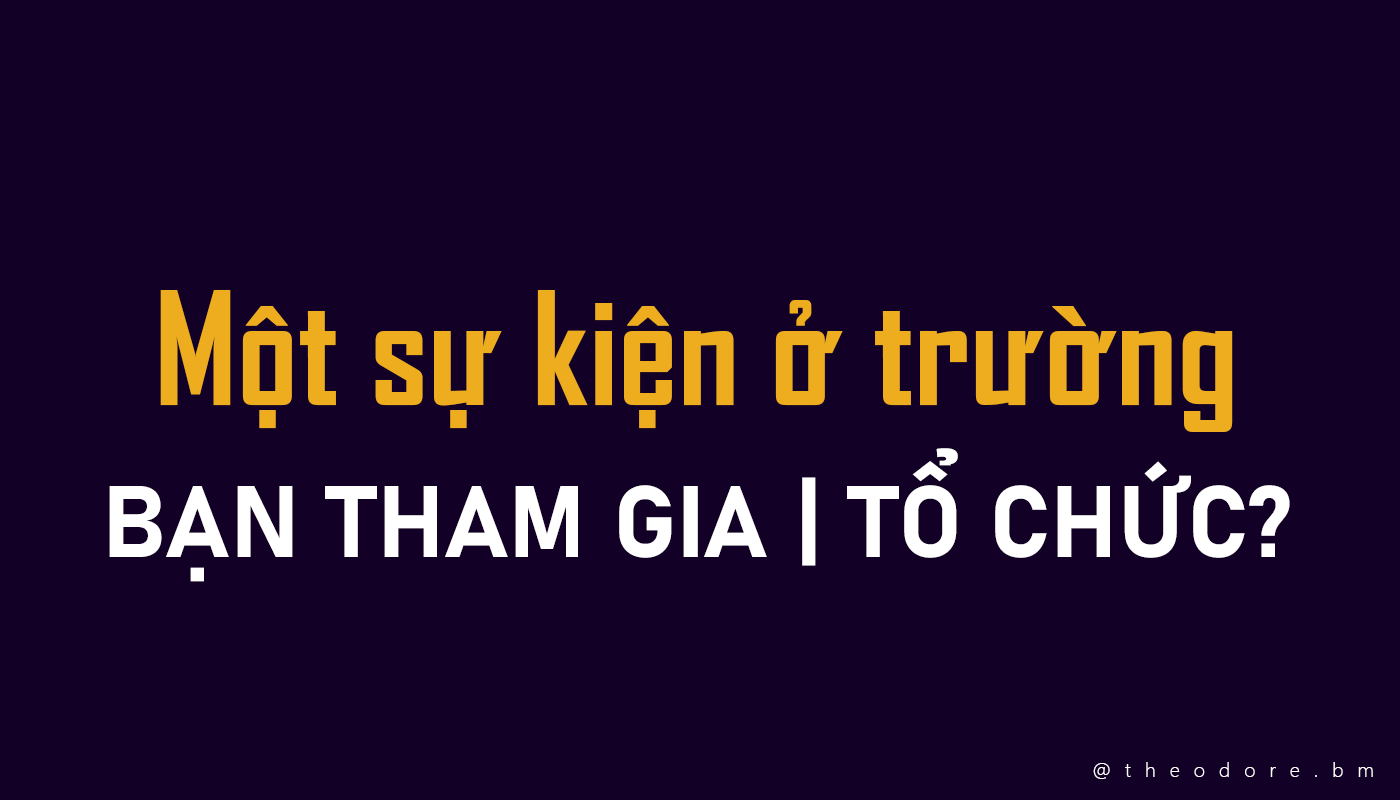
<style>
.page{position:relative;width:1400px;height:800px;background:#120026}
.page>*{position:absolute;margin:0}
.t1{font:150px "SVN-AgencyFBbold";color:#eead1f}
.t2{font:100px "Bahnschrift-Bold";color:#ffffff}
.t3{font:20px "SegoeUI-Light";letter-spacing:0.7em;color:#ffffff}
</style>
<div class="page">
<p class="t1" style="left:160px;top:290px;width:1073px;height:142px">Một sự kiện ở trường</p>
<p class="t2" style="left:109px;top:448px;width:1181px;height:134px">BẠN THAM GIA | TỔ CHỨC?</p>
<p class="t3" style="left:1093px;top:762px;width:280px;height:17px">@theodore.bm</p>
</div>
